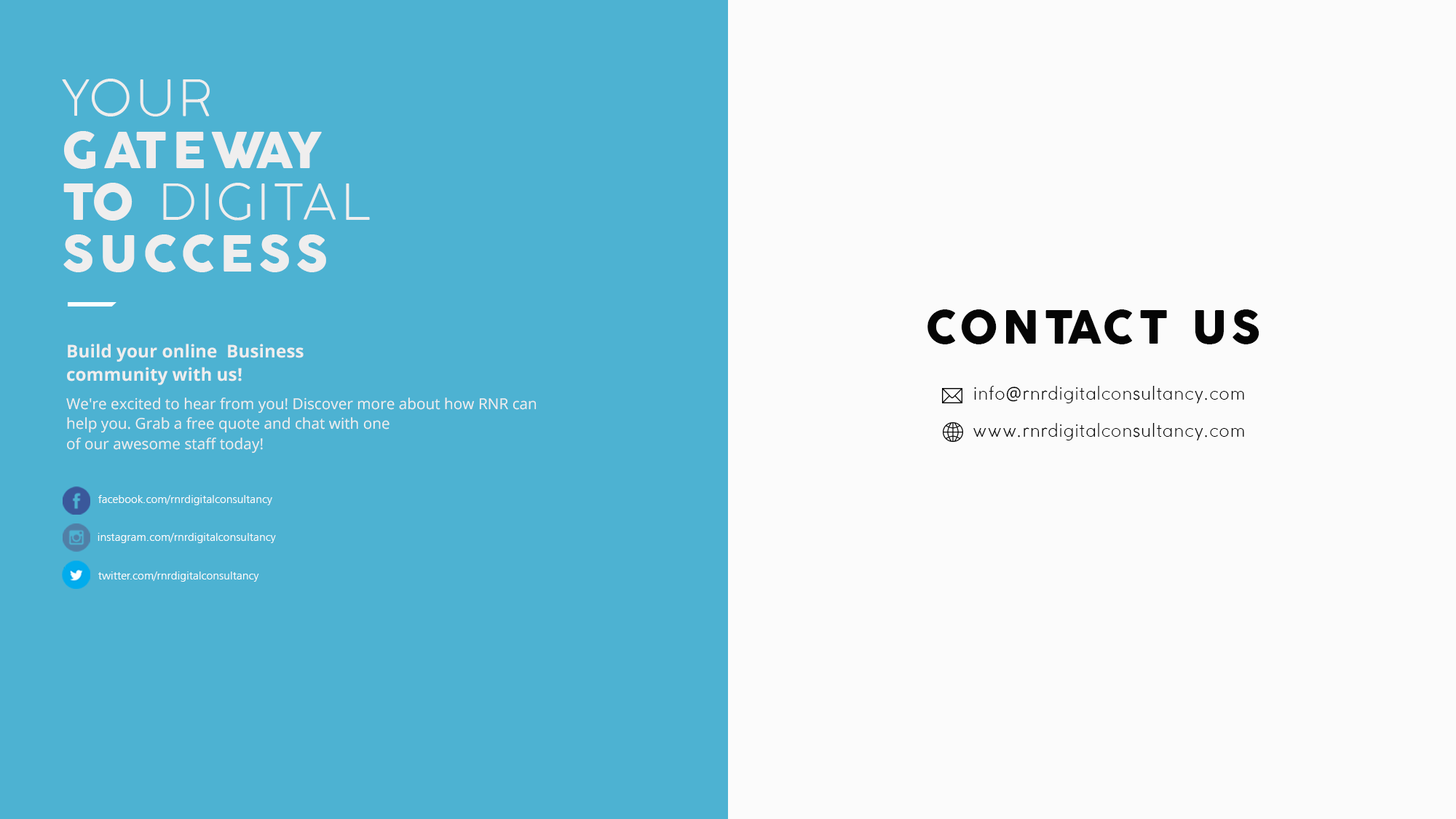
<style>
.page{position:relative;width:1456px;height:819px;background:#fbfbfb}
.page>*{position:absolute;margin:0}
.t1{font:49.4px/51.9px "CocoGothic-Heavy";letter-spacing:0.1em;color:#efeeee}
.t2{font:49.4px/51.9px "CocoGothic-Light";letter-spacing:0.1em;color:#efeeee}
.t3{font:45px "CocoGothic-Heavy";letter-spacing:0.1em;color:#050505}
.t4{font:17.7px/23.3px "OpenSans-Bold";color:#efeeee}
.t5{font:18.1px/37.1px "CocoGothic-Light";letter-spacing:0.04em;color:#050505}
.t6{font:18.1px/37.1px "OpenSans";letter-spacing:0.04em;color:#050505}
.t7{font:15.2px/20.1px "OpenSans";color:#efeeee}
.t8{font:11.6px "Humanist777BT-LightB";color:#fbfbfb}
</style>
<div class="page">
<p class="t1" style="left:62px;top:79px;width:308px;height:193px"><span class="t2">YOUR <br></span>GATEWAY <br>TO<span class="t2"> DIGITAL <br></span>SUCCESS</p>
<p class="t3" style="left:927px;top:309px;width:332px;height:35px">CONTACT US</p>
<p class="t4" style="left:67px;top:344px;width:237px;height:41px">Build your online  Business<br>community with us!</p>
<p class="t5" style="left:973px;top:386px;width:271px;height:54px;text-align:right">info<span class="t6">@</span>rnrdigitalconsultancy.com<br>www.rnrdigitalconsultancy.com</p>
<p class="t7" style="left:66px;top:397px;width:471px;height:57px">We're excited to hear from you! Discover more about how RNR can help you. Grab a free quote and chat with one <br>of our awesome staff today!</p>
<p class="t8" style="left:98px;top:495px;width:174px;height:10px">facebook.com/rnrdigitalconsultancy</p>
<p class="t8" style="left:98px;top:533px;width:178px;height:10px">instagram.com/rnrdigitalconsultancy</p>
<p class="t8" style="left:98px;top:571px;width:161px;height:11px">twitter.com/rnrdigitalconsultancy</p>
</div>
